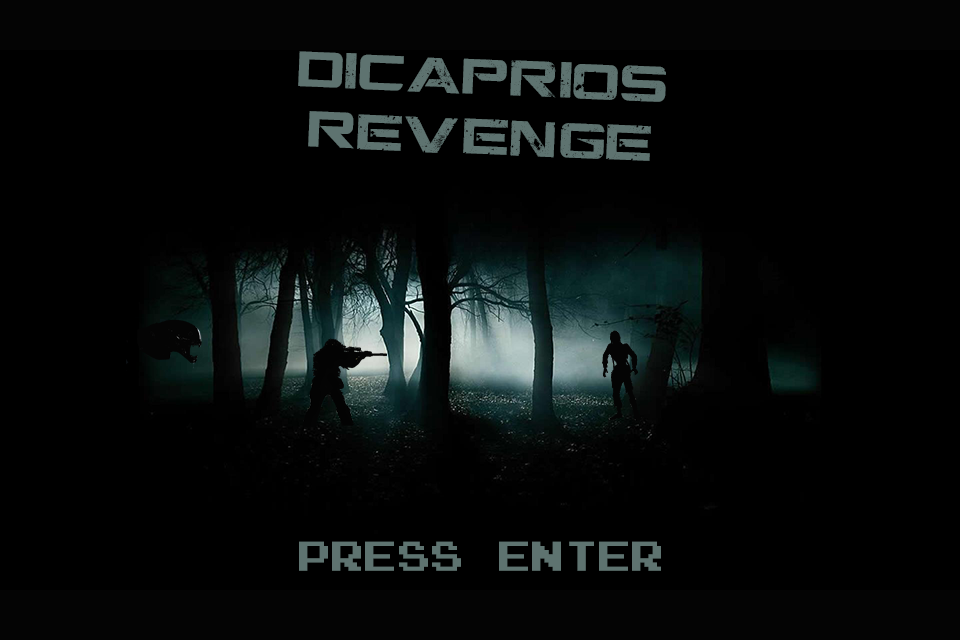
<style>
.page{position:relative;width:960px;height:640px;background:#000000}
.page>*{position:absolute;margin:0}
.t1{font:50px "CGFLocustResistance";color:#5e7370}
.t2{font:33.3px "PressStart2P";color:#5e7370}
</style>
<div class="page">
<p class="t1" style="left:298px;top:51px;width:368px;height:110px;rotate:2deg">DiCaprios Revenge</p>
<p class="t2" style="left:299px;top:541px;width:362px;height:30px">PRESS ENTER</p>
</div>
